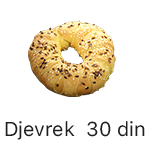
<style>
.page{position:relative;width:150px;height:150px;background:#ffffff}
.page>*{position:absolute;margin:0}
.t1{font:20px "SFProText-Regular";color:#201e1f}
</style>
<div class="page">
<p class="t1" style="left:5px;top:121px;width:140px;height:19px">Djevrek  30 din</p>
</div>
